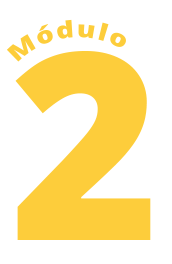
<style>
.page{position:relative;width:172px;height:264px;background:#ffffff}
.page>*{position:absolute;margin:0}
.t1{font:22.8px "OpenSans-Extrabold";letter-spacing:0.1em;color:#fdcd3b}
.t2{font:261.1px "OpenSans-Extrabold";color:#fdcd3b}
</style>
<div class="page">
<p class="t1" style="left:6px;top:19px;width:120px;height:43px;rotate:-6deg">Módulo</p>
<p class="t2" style="left:15px;top:51px;width:136px;height:189px">2</p>
</div>
